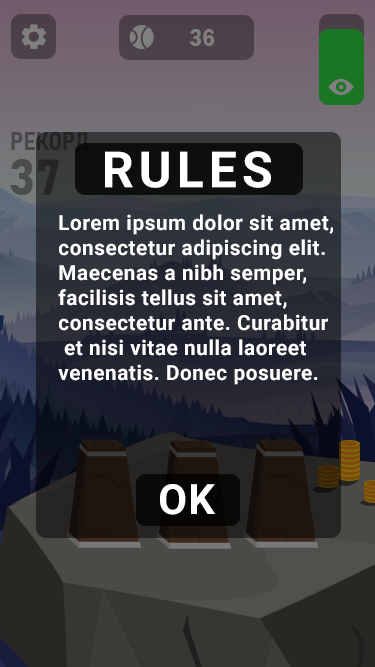
<style>
.page{position:relative;width:375px;height:667px}
.page>*{position:absolute;margin:0}
.t1{font:25px "FranklinGothic-DemiCond";color:#7f7f7f}
.t2{font:25px "Bahnschrift-BoldSemiCondensed"}
.t3{font:50px "Bahnschrift-Bold"}
.t4{font:50px "Roboto-Bold";letter-spacing:0.1em;color:#ffffff}
.t5{font:20.8px "Roboto-Bold";letter-spacing:0.025em;color:#ffffff}
.t6{font:41.7px "Roboto-Bold";letter-spacing:0.025em;color:#ffffff}
</style>
<div class="page">
<p class="t1" style="left:189px;top:29px;width:26px;height:17px">36</p>
<p class="t2" style="left:11px;top:132px;width:78px;height:22px">РЕКОРД</p>
<p class="t3" style="left:10px;top:159px;width:49px;height:36px">37</p>
<p class="t4" style="left:105px;top:151px;width:166px;height:37px">RULES</p>
<p class="t5" style="left:58px;top:214px;width:275px;height:171px">Lorem ipsum dolor sit amet,<br>consectetur adipiscing elit. <br>Maecenas a nibh semper, <br>facilisis tellus sit amet, <br>consectetur ante. Curabitur<br> et nisi vitae nulla laoreet <br>venenatis. Donec posuere.</p>
<p class="t6" style="left:160px;top:484px;width:55px;height:31px">OK</p>
</div>
